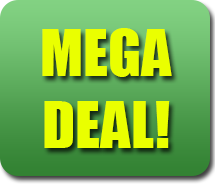
<style>
.page{position:relative;width:215px;height:185px}
.page>*{position:absolute;margin:0}
.t1{font:60px "Impact";color:#eaff00}
</style>
<div class="page">
<p class="t1" style="left:42px;top:28px;width:130px;height:120px;text-align:center">MEGA<br>DEAL!</p>
</div>
